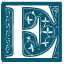
<style>
.page{position:relative;width:64px;height:64px;background:#0b586e}
.page>*{position:absolute;margin:0}
.t1{font:70.6px "FleurCornerCaps";color:#0b586e}
</style>
<div class="page">
<p class="t1" style="left:1px;top:3px;width:61px;height:57px">E</p>
</div>
